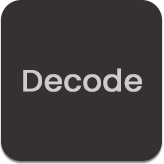
<style>
.page{position:relative;width:164px;height:164px;background:#353133}
.page>*{position:absolute;margin:0}
.t1{font:30.2px "Poppins-Regular";color:#cccccc;font-weight:bold}
</style>
<div class="page">
<p class="t1" style="left:23px;top:68px;width:119px;height:24px">Decode</p>
</div>
